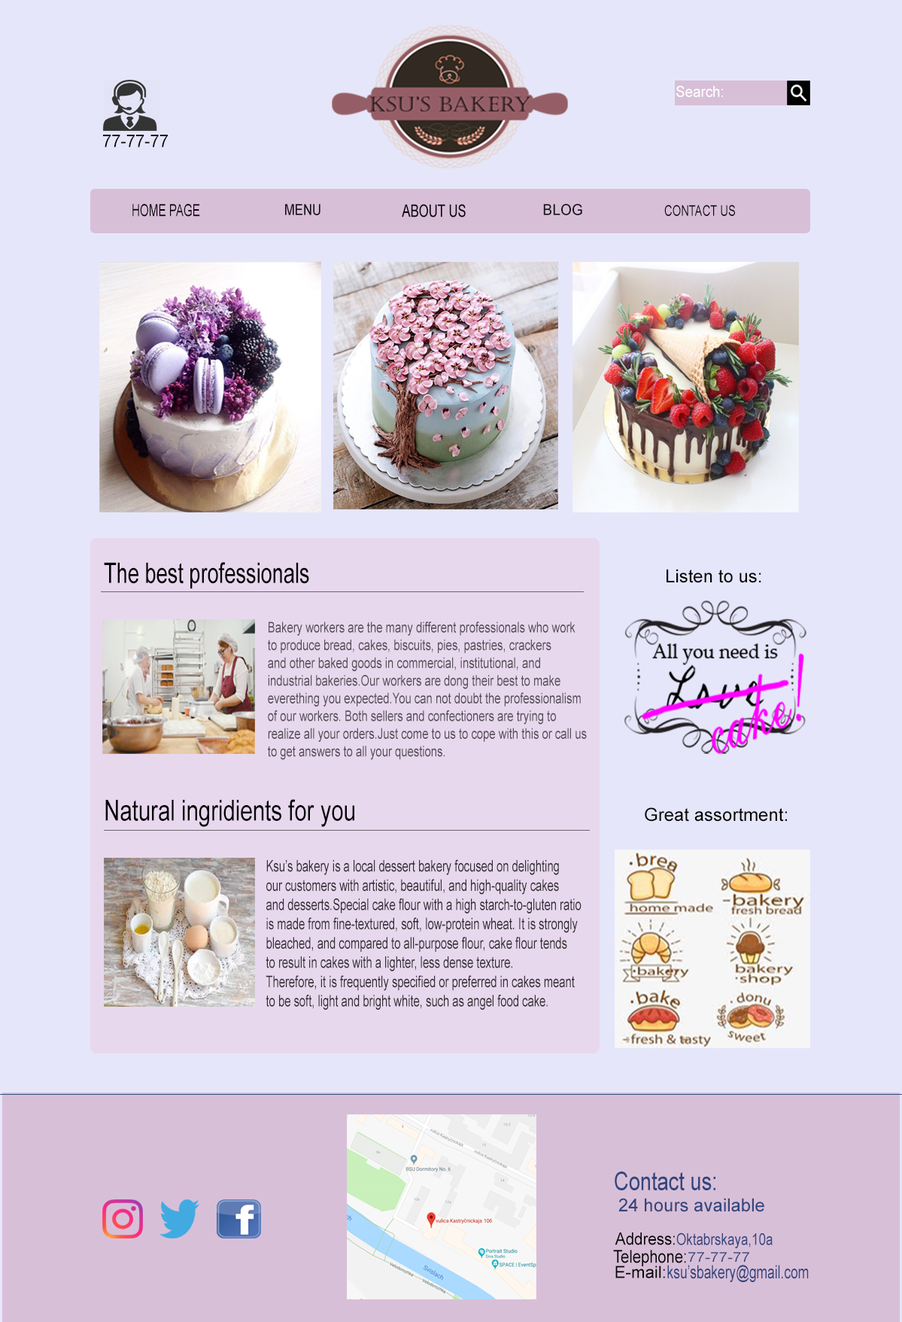
<style>
.page{position:relative;width:902px;height:1322px;background:#e6e6fa}
.page>*{position:absolute;margin:0}
.t1{font:15.1px "ArialMT";color:#ffffff;scale:0.94 1}
.t2{font:17.4px "ArialMT";color:#050505;scale:0.95 1}
.t3{font:16.7px "ArialMT";color:#050505;scale:0.69 1}
.t4{font:20.8px "ClarendonBT-Roman";color:#050505;scale:0.69 1}
.t5{font:15px "ArialMT";color:#121212;scale:0.83 1}
.t6{font:17.3px "ArialMT";color:#050505;scale:0.73 1}
.t7{font:15px "ArialMT";color:#171717;scale:0.97 1}
.t8{font:14.8px "ArialMT";color:#080808;scale:0.75 1}
.t9{font:28.4px "ArialMT";color:#050505;scale:0.72 1}
.t10{font:18.1px "ArialMT";color:#050505}
.t11{font:14.7px "ArialMT";color:#554f57;scale:0.76 1}
.t12{font:28.9px "ArialMT";color:#050505;scale:0.76 1}
.t13{font:16px "ArialMT";color:#332f34;scale:0.69 1}
.t14{font:25.7px "ArialMT";color:#33467d;scale:0.8 1}
.t15{font:18.1px "ArialMT";color:#33467d}
.t16{font:17px "ArialMT";color:#050505;scale:0.9 1}
.t17{font:16.2px "ArialMT";color:#33467d;scale:0.79 1}
.t18{font:17.6px "ArialMT";color:#050505;scale:0.86 1}
.t19{font:13.5px "ArialMT";color:#33467d;scale:1.16 1}
.t20{font:16.8px "ArialMT";color:#050505}
.t21{font:18.2px "ArialMT";color:#33467d;scale:0.72 1}
</style>
<div class="page">
<p class="t1" style="left:676px;top:86px;width:47px;height:11px">Search:</p>
<p class="t2" style="left:103px;top:135px;width:65px;height:12px">77-77-77</p>
<p class="t3" style="left:132px;top:204px;width:68px;height:13px"><span class="t4"> </span>HOME PAGE</p>
<p class="t5" style="left:285px;top:204px;width:36px;height:11px">MENU</p>
<p class="t6" style="left:402px;top:204px;width:64px;height:13px">ABOUT US</p>
<p class="t7" style="left:543px;top:204px;width:39px;height:11px">BLOG</p>
<p class="t8" style="left:664px;top:205px;width:71px;height:11px">CONTACT US</p>
<p class="t9" style="left:104px;top:562px;width:205px;height:27px">The best professionals</p>
<p class="t10" style="left:667px;top:569px;width:94px;height:14px">Listen to us:</p>
<p class="t11" style="left:268px;top:621px;width:319px;height:139px">Bakery workers are the many different professionals who work<br>to produce bread, cakes, biscuits, pies, pastries, crackers <br>and other baked goods in commercial, institutional, and <br>industrial bakeries.Our workers are dong their best to make <br>everething you expected.You can not doubt the professionalism <br>of our workers. Both sellers and confectioners are trying to <br>realize all your orders.Just come to us to cope with this or call us <br>to get answers to all your questions.</p>
<p class="t12" style="left:105px;top:799px;width:249px;height:28px">Natural ingridients for you</p>
<p class="t10" style="left:645px;top:807px;width:142px;height:15px">Great assortment:</p>
<p class="t13" style="left:266px;top:859px;width:316px;height:151px">Ksu’s bakery is a local dessert bakery focused on delighting <br>our customers with artistic, beautiful, and high-quality cakes<br>and desserts.Special cake flour with a high starch-to-gluten ratio<br>is made from fine-textured, soft, low-protein wheat. It is strongly <br>bleached, and compared to all-purpose flour, cake flour tends<br>to result in cakes with a lighter, less dense texture.<br>Therefore, it is frequently specified or preferred in cakes meant<br>to be soft, light and bright white, such as angel food cake.</p>
<p class="t14" style="left:615px;top:1171px;width:100px;height:19px">Contact us:</p>
<p class="t15" style="left:618px;top:1198px;width:146px;height:14px">24 hours available</p>
<p class="t16" style="left:615px;top:1232px;width:60px;height:13px">Address:</p>
<p class="t17" style="left:676px;top:1232px;width:97px;height:16px">Oktabrskaya,10a</p>
<p class="t18" style="left:613px;top:1250px;width:73px;height:16px">Telephone:</p>
<p class="t19" style="left:688px;top:1252px;width:61px;height:10px">77-77-77</p>
<p class="t20" style="left:615px;top:1265px;width:50px;height:13px">E-mail:</p>
<p class="t21" style="left:667px;top:1265px;width:142px;height:17px">ksu’sbakery@gmail.com</p>
</div>
